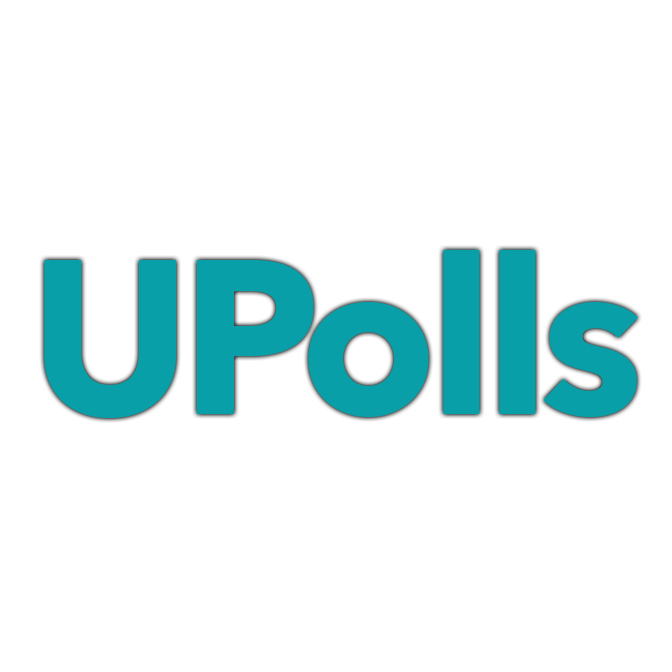
<style>
.page{position:relative;width:672px;height:672px;background:#ffffff}
.page>*{position:absolute;margin:0}
.t1{font:216.7px "AvenirNext-Bold";letter-spacing:-0.04em;color:#089fa8}
</style>
<div class="page">
<p class="t1" style="left:44px;top:249px;width:594px;height:169px">UPolls</p>
</div>
